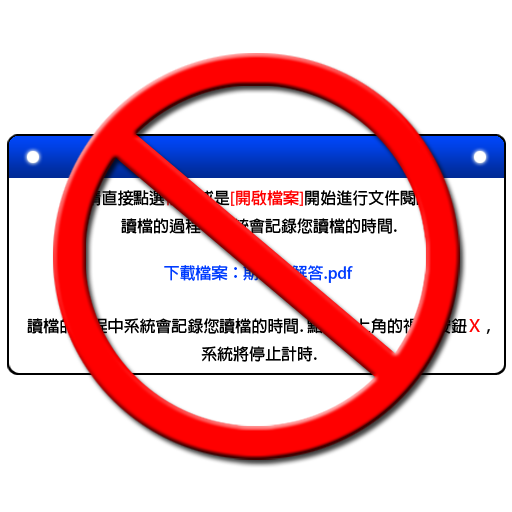
<style>
.page{position:relative;width:512px;height:512px;background:#ffffff}
.page>*{position:absolute;margin:0}
.t1{font:16px "AdobeFanHeitiStd-Bold";color:#000000}
.t2{font:16px "AdobeFanHeitiStd-Bold";color:#ff0000}
.t3{font:16px "AdobeFanHeitiStd-Bold";color:#003cff}
</style>
<div class="page">
<p class="t1" style="left:85px;top:190px;width:347px;height:44px;text-align:center">請直接點選<span class="t2">檔名</span>或是<span class="t2">[開啟檔案]</span>開始進行文件閱讀<br>讀檔的過程中系統會記錄您讀檔的時間.</p>
<p class="t3" style="left:164px;top:265px;width:189px;height:18px">下載檔案：期末考解答.pdf</p>
<p class="t1" style="left:27px;top:318px;width:463px;height:44px;text-align:center">讀檔的過程中系統會記錄您讀檔的時間. 點選右上角的視窗按鈕<span class="t2">Ｘ</span> ,<br>系統將停止計時.</p>
</div>
